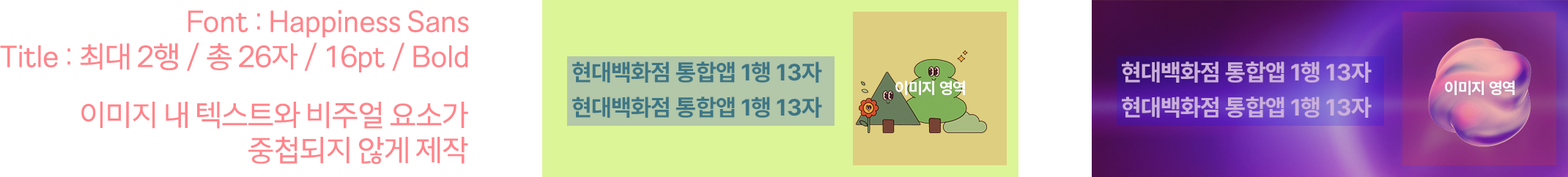
<style>
.page{position:relative;width:1568px;height:177px;background:#ffffff}
.page>*{position:absolute;margin:0}
.t1{font:29.3px/35.2px "Happiness-Sans-Regular";letter-spacing:-0.03em;color:#ff858b}
.t2{font:23.4px/35.2px "Pretendard-Bold";letter-spacing:-0.015em;color:#3d7685}
.t3{font:23.4px/35.2px "Pretendard-Bold";letter-spacing:-0.015em;color:#cbafda}
.t4{font:16.1px "Pretendard-Bold";letter-spacing:-0.02em;color:#ffffff}
</style>
<div class="page">
<p class="t1" style="left:0px;top:10px;width:469px;height:63px;text-align:right">Font : Happiness Sans<br>Title : 최대 2행 / 총 26자 / 16pt / Bold</p>
<p class="t2" style="left:572px;top:62px;width:250px;height:56px">현대백화점 통합앱 1행 13자<br>현대백화점 통합앱 1행 13자</p>
<p class="t3" style="left:1122px;top:62px;width:250px;height:56px">현대백화점 통합앱 1행 13자<br>현대백화점 통합앱 1행 13자</p>
<p class="t4" style="left:895px;top:81px;width:70px;height:14px">이미지 영역</p>
<p class="t4" style="left:1445px;top:81px;width:70px;height:14px">이미지 영역</p>
<p class="t1" style="left:81px;top:102px;width:387px;height:63px;text-align:right">이미지 내 텍스트와 비주얼 요소가<br>중첩되지 않게 제작</p>
</div>
